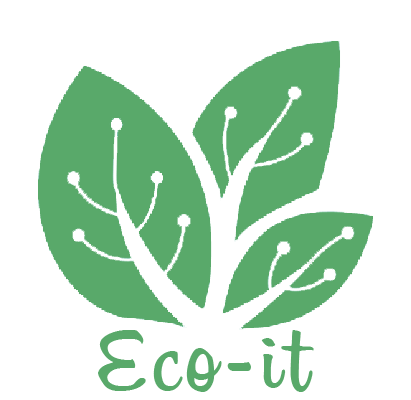
<style>
.page{position:relative;width:411px;height:400px;background:#ffffff}
.page>*{position:absolute;margin:0}
.t1{font:96px "Billabong";letter-spacing:0.05em;color:#59a96a}
</style>
<div class="page">
<p class="t1" style="left:98px;top:330px;width:216px;height:62px">Eco-it</p>
</div>
